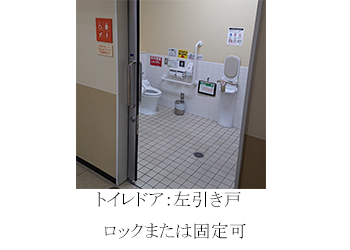
<style>
.page{position:relative;width:350px;height:250px;background:#ffffff}
.page>*{position:absolute;margin:0}
.t1{font:18px "MS-PMincho";color:#000000}
</style>
<div class="page">
<p class="t1" style="left:97px;top:191px;width:149px;height:48px;text-align:center">トイレドア：左引き戸　<br>ロックまたは固定可</p>
</div>
